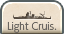
<style>
.page{position:relative;width:64px;height:34px}
.page>*{position:absolute;margin:0}
.t1{font:10px "UDShinGoPro-Light";color:#6a6560;scale:0.9 1}
</style>
<div class="page">
<p class="t1" style="left:7px;top:21px;width:50px;height:12px">Light Cruis.</p>
</div>
